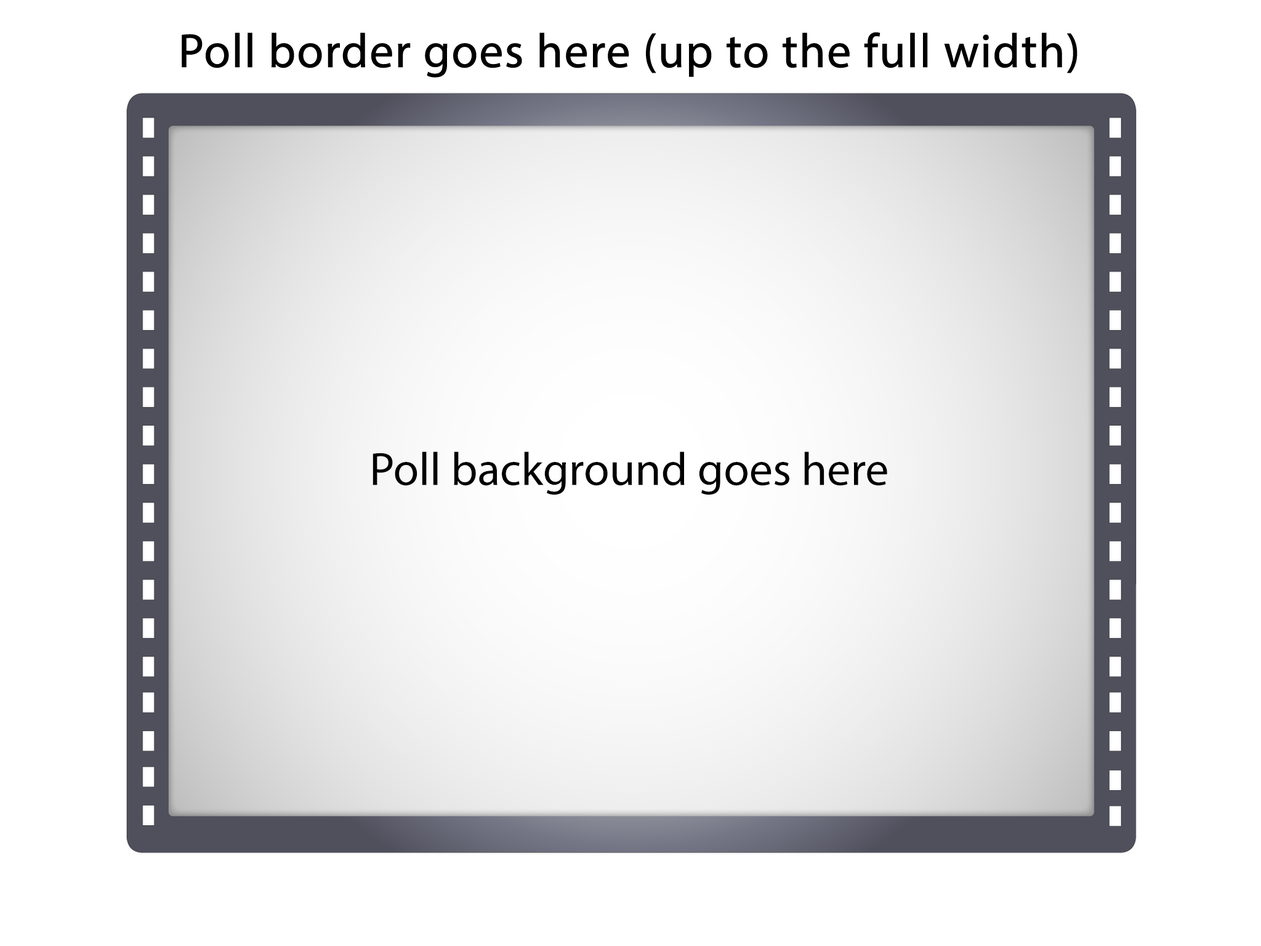
<style>
.page{position:relative;width:1261px;height:946px;background:#ffffff}
.page>*{position:absolute;margin:0}
.t1{font:48px "MyriadPro-Regular";color:#000000;font-weight:bold}
.t2{font:46.8px "MyriadPro-Regular";color:#000000}
</style>
<div class="page">
<p class="t1" style="left:182px;top:32px;width:895px;height:46px">Poll border goes here (up to the full width)</p>
<p class="t2" style="left:372px;top:451px;width:515px;height:44px">Poll background goes here</p>
</div>
